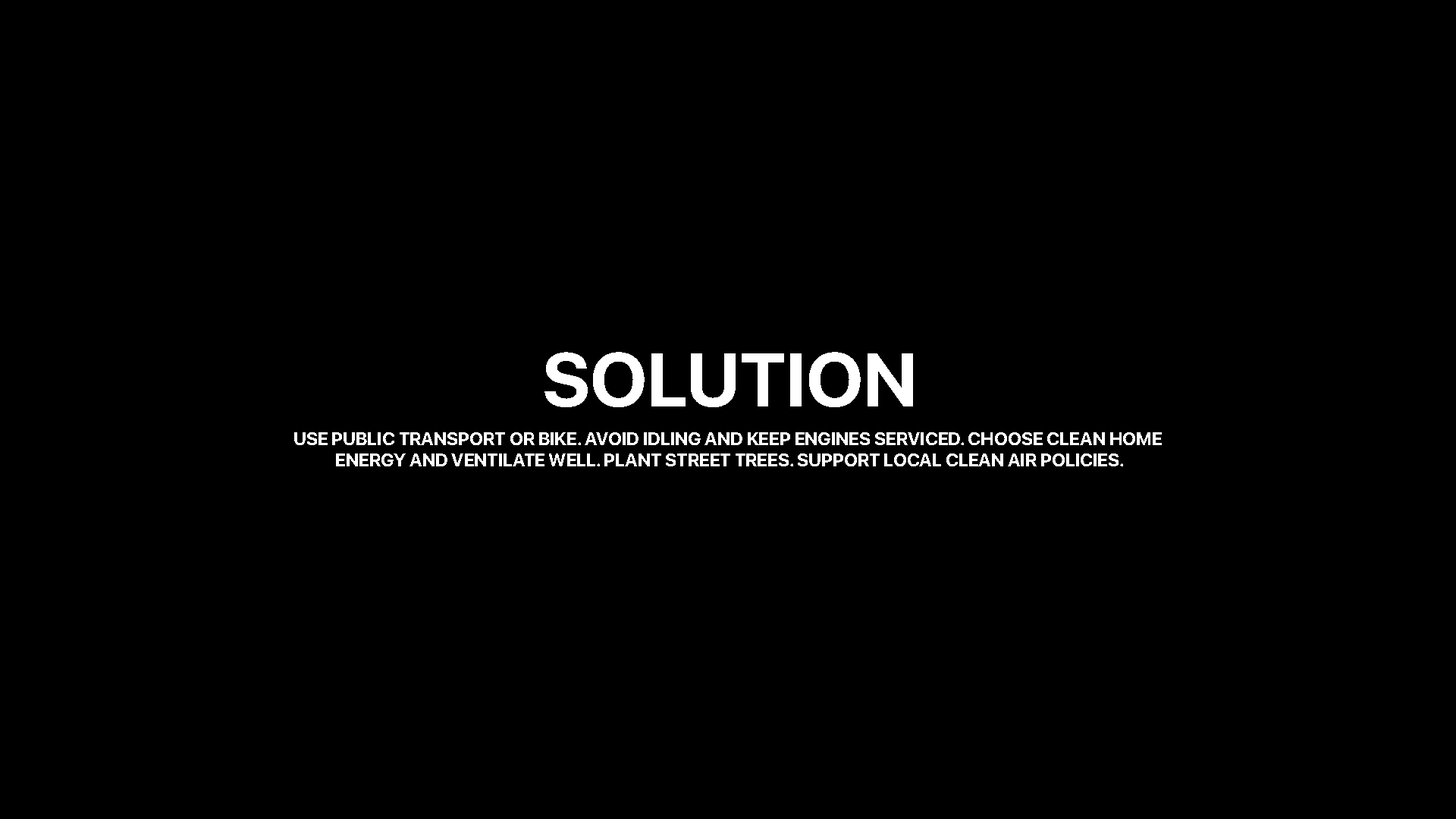
<style>
.page{position:relative;width:1456px;height:819px;background:#000000}
.page>*{position:absolute;margin:0}
.t1{font:75.8px "SFProDisplay-Bold";color:#ffffff;text-transform:uppercase}
.t2{font:18.2px "SFProDisplay-Bold";color:#ffffff;text-transform:uppercase}
</style>
<div class="page">
<p class="t1" style="left:544px;top:352px;width:369px;height:55px">solution</p>
<p class="t2" style="left:294px;top:432px;width:868px;height:34px;text-align:center">Use public transport or bike. Avoid idling and keep engines serviced. Choose clean home <br>energy and ventilate well. Plant street trees. Support local clean air policies.</p>
</div>
